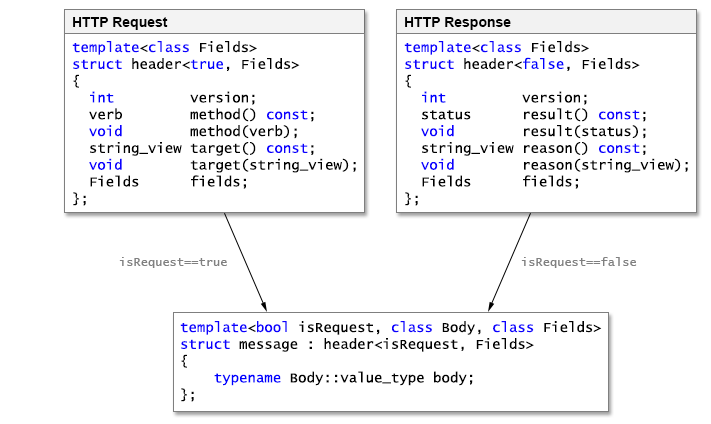
<style>
.page{position:relative;width:711px;height:424px;background:#ffffff}
.page>*{position:absolute;margin:0}
.t1{font:14px "Arial-BoldMT";color:#010101}
.t2{font:14px "LucidaConsole";color:#000000}
.t3{font:14px "LucidaConsole";color:#0c00ff}
.t4{font:14px "LucidaConsole";color:#0000ff}
.t5{font:12px "LucidaConsole";color:#808080}
</style>
<div class="page">
<p class="t1" style="left:73px;top:17px;width:95px;height:13px">HTTP Request</p>
<p class="t1" style="left:405px;top:17px;width:106px;height:13px">HTTP Response</p>
<p class="t2" style="left:72px;top:41px;width:284px;height:165px"><span class="t3">template</span>&lt;<span class="t3">class </span>Fields&gt;<br><span class="t3">struct </span>header&lt;<span class="t4">true</span>, Fields&gt;<br>{<br>  <span class="t4">int</span>         version;<br>  verb        method() <span class="t3">const</span>;<br>  <span class="t3">void</span>        method(verb);<br>  string_view target() <span class="t3">const</span>;<br>  <span class="t3">void</span>        target(string_view);<br>  Fields      fields;<br>};</p>
<p class="t2" style="left:404px;top:41px;width:284px;height:165px"><span class="t3">template</span>&lt;<span class="t3">class </span>Fields&gt;<br><span class="t3">struct </span>header&lt;<span class="t4">false</span>, Fields&gt;<br>{<br>  <span class="t4">int</span>         version;<br>  status      result() <span class="t3">const</span>;<br><span class="t3">  void</span>        result(status);<br>  string_view reason() <span class="t3">const</span>;<br>  <span class="t3">void</span>        reason(string_view);<br>  Fields      fields;<br>};</p>
<p class="t5" style="left:119px;top:257px;width:108px;height:11px">isRequest==true</p>
<p class="t5" style="left:521px;top:257px;width:116px;height:11px">isRequest==false</p>
<p class="t2" style="left:180px;top:321px;width:422px;height:81px"><span class="t3">template</span>&lt;<span class="t3">bool</span> isRequest, <span class="t3">class</span> Body, <span class="t3">class</span> Fields&gt;<br><span class="t3">struct </span>message : header&lt;isRequest, Fields&gt;<br>{<br>    <span class="t4">typename</span> Body::value_type body;<br>};</p>
</div>
